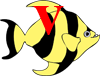
<style>
.page{position:relative;width:100px;height:76px;background:#ffffff}
.page>*{position:absolute;margin:0}
.t1{font:61.6px "TimesNewRomanPS-BoldMT";color:#ff0000}
</style>
<div class="page">
<p class="t1" style="left:33px;top:6px;width:31px;height:29px">v</p>
</div>
